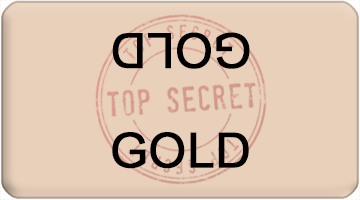
<style>
.page{position:relative;width:360px;height:200px;background:#e8d0bb}
.page>*{position:absolute;margin:0}
.t1{font:48px "ArialMT";color:#000000;font-weight:bold}
</style>
<div class="page">
<p class="t1" style="left:112px;top:32px;width:138px;height:37px;rotate:180deg">GOLD</p>
<p class="t1" style="left:112px;top:132px;width:137px;height:37px">GOLD</p>
</div>
